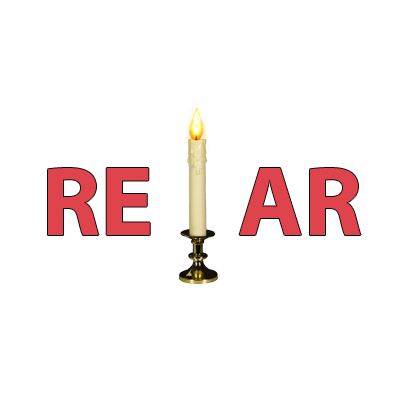
<style>
.page{position:relative;width:400px;height:400px;background:#ffffff}
.page>*{position:absolute;margin:0}
.t1{font:100px "MyriadPro-Bold";color:#df444c}
</style>
<div class="page">
<p class="t1" style="left:48px;top:168px;width:102px;height:67px">RE</p>
<p class="t1" style="left:239px;top:168px;width:122px;height:67px">AR</p>
</div>
